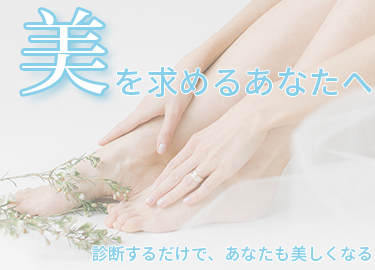
<style>
.page{position:relative;width:375px;height:270px}
.page>*{position:absolute;margin:0}
.t1{font:89.9px "KozMinPro-Medium";color:#ffffff}
.t2{font:32.5px "NotoSansJP-Medium";color:#88cfea}
.t3{font:16.9px "NotoSansJP-Medium";color:#88cfea}
</style>
<div class="page">
<p class="t1" style="left:22px;top:9px;width:85px;height:85px">美</p>
<p class="t2" style="left:116px;top:66px;width:256px;height:31px">を求めるあなたへ</p>
<p class="t3" style="left:92px;top:245px;width:279px;height:17px">診断するだけで、あなたも美しくなる</p>
</div>
